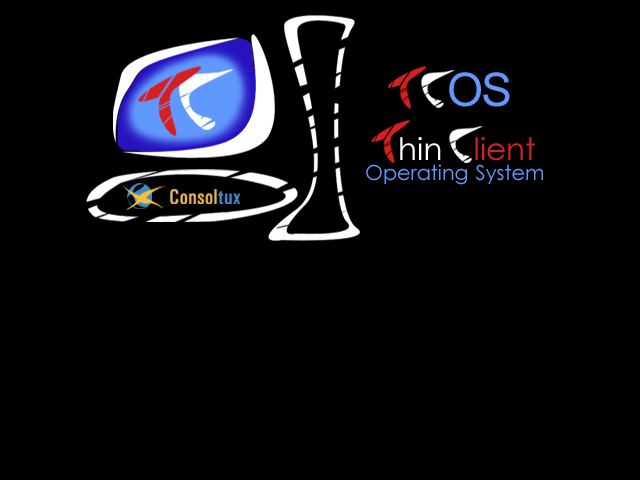
<style>
.page{position:relative;width:640px;height:480px;background:#000000}
.page>*{position:absolute;margin:0}
.t1{font:46.4px "ArialMT";color:#6098fd}
.t2{font:30.9px "LevenimMT";color:#ffffff}
.t3{font:30.9px "LevenimMT";color:#d62020}
.t4{font:20.6px "LevenimMT";color:#6098fd}
</style>
<div class="page">
<p class="t1" style="left:449px;top:72px;width:32px;height:35px">O</p>
<p class="t1" style="left:483px;top:72px;width:27px;height:35px">S</p>
<p class="t2" style="left:400px;top:137px;width:41px;height:23px">hin</p>
<p class="t3" style="left:475px;top:137px;width:60px;height:24px">lient</p>
<p class="t4" style="left:366px;top:164px;width:177px;height:21px">Operating System</p>
</div>
